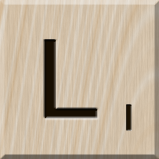
<style>
.page{position:relative;width:159px;height:159px}
.page>*{position:absolute;margin:0}
.t1{font:116px "MS-UIGothic";color:#180e01}
.t2{font:36px "GillSansMT";color:#1c1101;font-weight:bold;scale:1.1 1}
</style>
<div class="page">
<p class="t1" style="left:44px;top:40px;width:54px;height:79px">L</p>
<p class="t2" style="left:126px;top:104px;width:6px;height:27px">1</p>
</div>
